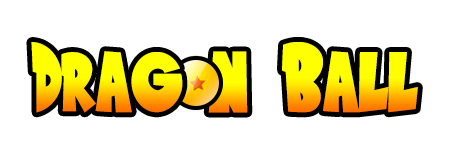
<style>
.page{position:relative;width:461px;height:156px;background:#ffffff}
.page>*{position:absolute;margin:0}
.t1{font:100px "SaiyanSans"}
</style>
<div class="page">
<p class="t1" style="left:31px;top:42px;width:387px;height:71px">Drag  Ball</p>
<p class="t1" style="left:208px;top:51px;width:40px;height:62px">n</p>
</div>
